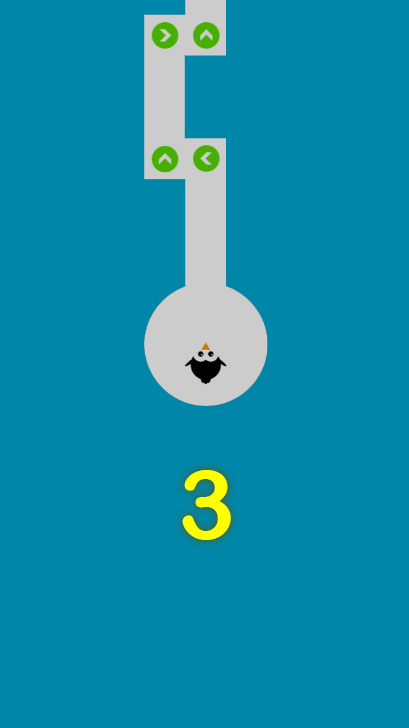
<style>
.page{position:relative;width:409px;height:728px;background:#0086a8}
.page>*{position:absolute;margin:0}
.t1{font:96px "ArialRoundedMTBold";color:#ffff00}
</style>
<div class="page">
<p class="t1" style="left:182px;top:470px;width:49px;height:70px">3</p>
</div>
